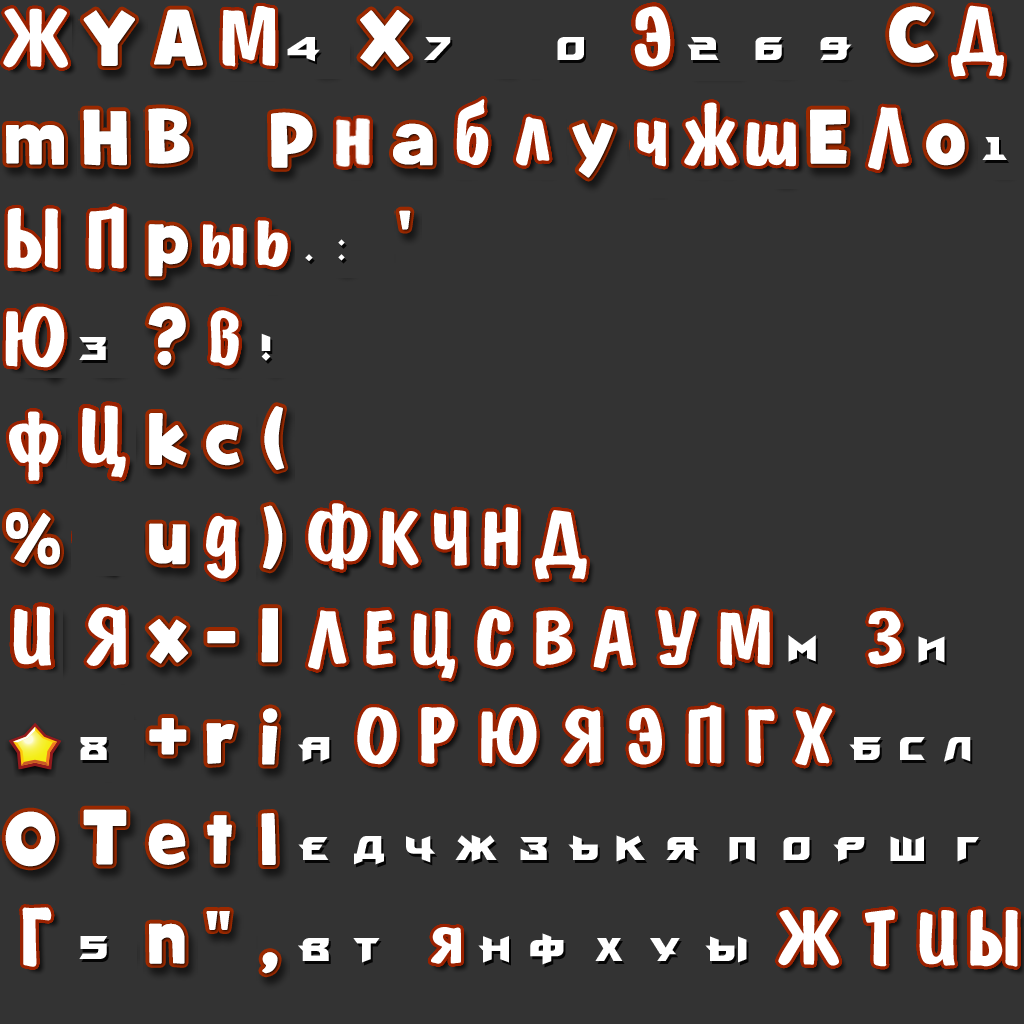
<style>
.page{position:relative;width:1024px;height:1024px;background:#333333}
.page>*{position:absolute;margin:0}
.t1{font:33px "ProunX-Bold";color:#ffffff}
.t2{font:78px "DomkratBold";color:#ffffff}
</style>
<div class="page">
<p class="t1" style="left:287px;top:37px;width:33px;height:25px">4</p>
<p class="t1" style="left:424px;top:37px;width:27px;height:23px">7</p>
<p class="t1" style="left:557px;top:37px;width:27px;height:23px">0</p>
<p class="t1" style="left:687px;top:37px;width:32px;height:23px">2</p>
<p class="t1" style="left:755px;top:37px;width:27px;height:23px">6</p>
<p class="t1" style="left:820px;top:37px;width:32px;height:23px">9</p>
<p class="t1" style="left:982px;top:137px;width:25px;height:23px">1</p>
<p class="t1" style="left:338px;top:239px;width:7px;height:22px">:</p>
<p class="t1" style="left:305px;top:254px;width:8px;height:8px">.</p>
<p class="t1" style="left:79px;top:337px;width:27px;height:23px">3</p>
<p class="t1" style="left:261px;top:333px;width:10px;height:28px">!</p>
<p class="t2" style="left:308px;top:503px;width:60px;height:67px">Ô</p>
<p class="t2" style="left:382px;top:510px;width:37px;height:56px">Ê</p>
<p class="t2" style="left:434px;top:510px;width:33px;height:56px">×</p>
<p class="t2" style="left:484px;top:507px;width:34px;height:60px">Í</p>
<p class="t2" style="left:535px;top:510px;width:52px;height:70px">Ä</p>
<p class="t2" style="left:308px;top:610px;width:39px;height:60px">Ë</p>
<p class="t2" style="left:366px;top:610px;width:27px;height:56px">Å</p>
<p class="t2" style="left:413px;top:611px;width:42px;height:68px">Ö</p>
<p class="t2" style="left:477px;top:609px;width:35px;height:58px">Ñ</p>
<p class="t2" style="left:536px;top:610px;width:37px;height:56px">Â</p>
<p class="t2" style="left:593px;top:609px;width:41px;height:60px">À</p>
<p class="t2" style="left:658px;top:609px;width:39px;height:56px">Ó</p>
<p class="t2" style="left:720px;top:608px;width:50px;height:58px">Ì</p>
<p class="t2" style="left:868px;top:610px;width:34px;height:55px">Ç</p>
<p class="t1" style="left:788px;top:635px;width:28px;height:27px">ì</p>
<p class="t1" style="left:918px;top:636px;width:27px;height:27px">è</p>
<p class="t2" style="left:357px;top:707px;width:40px;height:58px">Î</p>
<p class="t2" style="left:421px;top:707px;width:34px;height:57px">Ð</p>
<p class="t2" style="left:481px;top:707px;width:56px;height:57px">Þ</p>
<p class="t2" style="left:563px;top:708px;width:38px;height:56px">ß</p>
<p class="t2" style="left:628px;top:708px;width:34px;height:57px">Ý</p>
<p class="t2" style="left:688px;top:705px;width:34px;height:59px">Ï</p>
<p class="t2" style="left:748px;top:709px;width:27px;height:55px">Ã</p>
<p class="t2" style="left:795px;top:706px;width:38px;height:60px">Õ</p>
<p class="t1" style="left:80px;top:737px;width:27px;height:23px">8</p>
<p class="t1" style="left:298px;top:737px;width:32px;height:25px">à</p>
<p class="t1" style="left:849px;top:737px;width:32px;height:23px">á</p>
<p class="t1" style="left:900px;top:737px;width:25px;height:23px">ñ</p>
<p class="t1" style="left:944px;top:737px;width:27px;height:25px">ë</p>
<p class="t1" style="left:298px;top:837px;width:31px;height:23px">å</p>
<p class="t1" style="left:354px;top:836px;width:30px;height:29px">ä</p>
<p class="t1" style="left:406px;top:836px;width:29px;height:27px">÷</p>
<p class="t1" style="left:455px;top:835px;width:42px;height:27px">æ</p>
<p class="t1" style="left:520px;top:837px;width:27px;height:23px">ç</p>
<p class="t1" style="left:568px;top:835px;width:30px;height:25px">ü</p>
<p class="t1" style="left:616px;top:835px;width:29px;height:27px">ê</p>
<p class="t1" style="left:666px;top:837px;width:33px;height:25px">ÿ</p>
<p class="t1" style="left:729px;top:837px;width:26px;height:25px">ï</p>
<p class="t1" style="left:783px;top:837px;width:27px;height:23px">î</p>
<p class="t1" style="left:833px;top:837px;width:32px;height:25px">ð</p>
<p class="t1" style="left:890px;top:836px;width:34px;height:25px">ø</p>
<p class="t1" style="left:957px;top:837px;width:22px;height:25px">ã</p>
<p class="t2" style="left:778px;top:909px;width:61px;height:57px">Æ</p>
<p class="t2" style="left:865px;top:909px;width:30px;height:58px">Ò</p>
<p class="t2" style="left:919px;top:910px;width:36px;height:56px">È</p>
<p class="t2" style="left:970px;top:909px;width:48px;height:58px">Û</p>
<p class="t2" style="left:431px;top:927px;width:30px;height:37px">ÿ</p>
<p class="t1" style="left:79px;top:936px;width:29px;height:23px">5</p>
<p class="t1" style="left:298px;top:938px;width:31px;height:23px">â</p>
<p class="t1" style="left:353px;top:938px;width:27px;height:25px">ò</p>
<p class="t1" style="left:478px;top:936px;width:31px;height:27px">í</p>
<p class="t1" style="left:530px;top:933px;width:34px;height:32px">ô</p>
<p class="t1" style="left:595px;top:938px;width:28px;height:23px">õ</p>
<p class="t1" style="left:650px;top:938px;width:30px;height:23px">ó</p>
<p class="t1" style="left:705px;top:936px;width:42px;height:27px">û</p>
</div>
